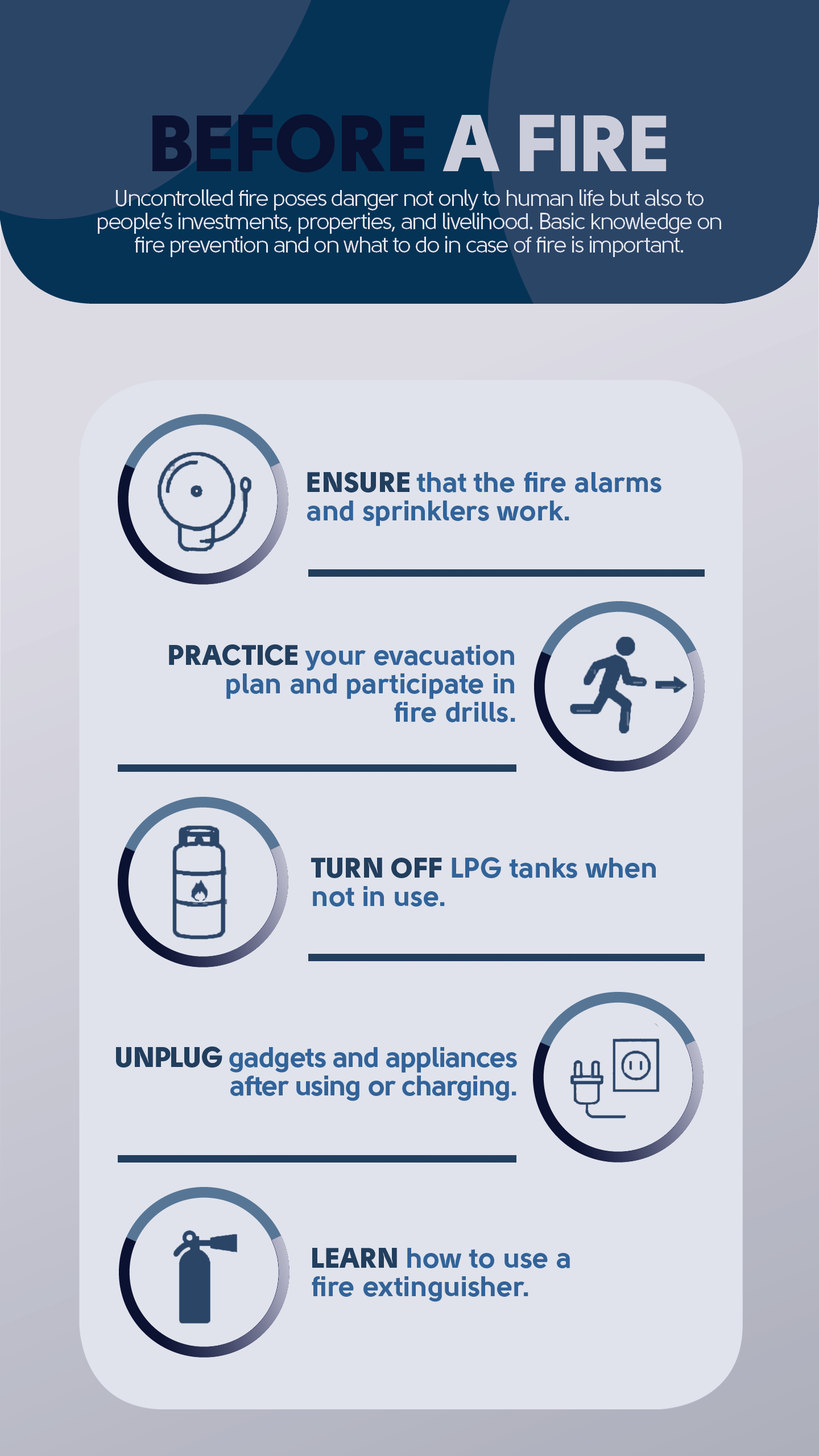
<style>
.page{position:relative;width:819px;height:1456px;background:#e0e3ec}
.page>*{position:absolute;margin:0}
.t1{font:28.4px/28.4px "Solomon-Sans-Bold";color:#326399}
.t2{font:28.4px/28.4px "Solomon-Sans-Black";color:#223e5d}
.t3{font:28.4px/28.4px "Solomon-Sans-Bold";letter-spacing:-0.025em;color:#326399}
.t4{font:28.4px/28.4px "Solomon-Sans-Black";letter-spacing:-0.025em;color:#223e5d}
</style>
<div class="page">
<p class="t1" style="left:307px;top:472px;width:354px;height:54px"><span class="t2">ENSURE </span>that the fire alarms<br>and sprinklers work.</p>
<p class="t1" style="left:169px;top:644px;width:346px;height:78px;text-align:right"><span class="t2">PRACTICE </span>your evacuation<br>plan and participate in<br>fire drills.</p>
<p class="t1" style="left:311px;top:857px;width:345px;height:50px"><span class="t2">TURN OFF </span>LPG tanks when<br>not in use.</p>
<p class="t3" style="left:116px;top:1046px;width:401px;height:55px;text-align:right"><span class="t4">UNPLUG </span>gadgets and appliances<br>after using or charging.</p>
<p class="t1" style="left:312px;top:1248px;width:258px;height:54px"><span class="t2">LEARN </span>how to use a<br>fire extinguisher.</p>
</div>
